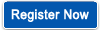
<style>
.page{position:relative;width:100px;height:30px;background:#0357ae}
.page>*{position:absolute;margin:0}
.t1{font:13.2px "ArialMT";letter-spacing:0.01em;color:#ffffff;font-weight:bold;scale:0.92 1}
</style>
<div class="page">
<p class="t1" style="left:11px;top:9px;width:78px;height:13px">Register Now</p>
</div>
